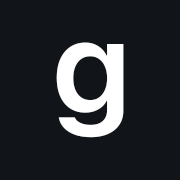
<style>
.page{position:relative;width:180px;height:180px;background:#11151a}
.page>*{position:absolute;margin:0}
.t1{font:133.3px "SFPro-Semibold";color:#ffffff}
</style>
<div class="page">
<p class="t1" style="left:56px;top:42px;width:68px;height:96px">g</p>
</div>
